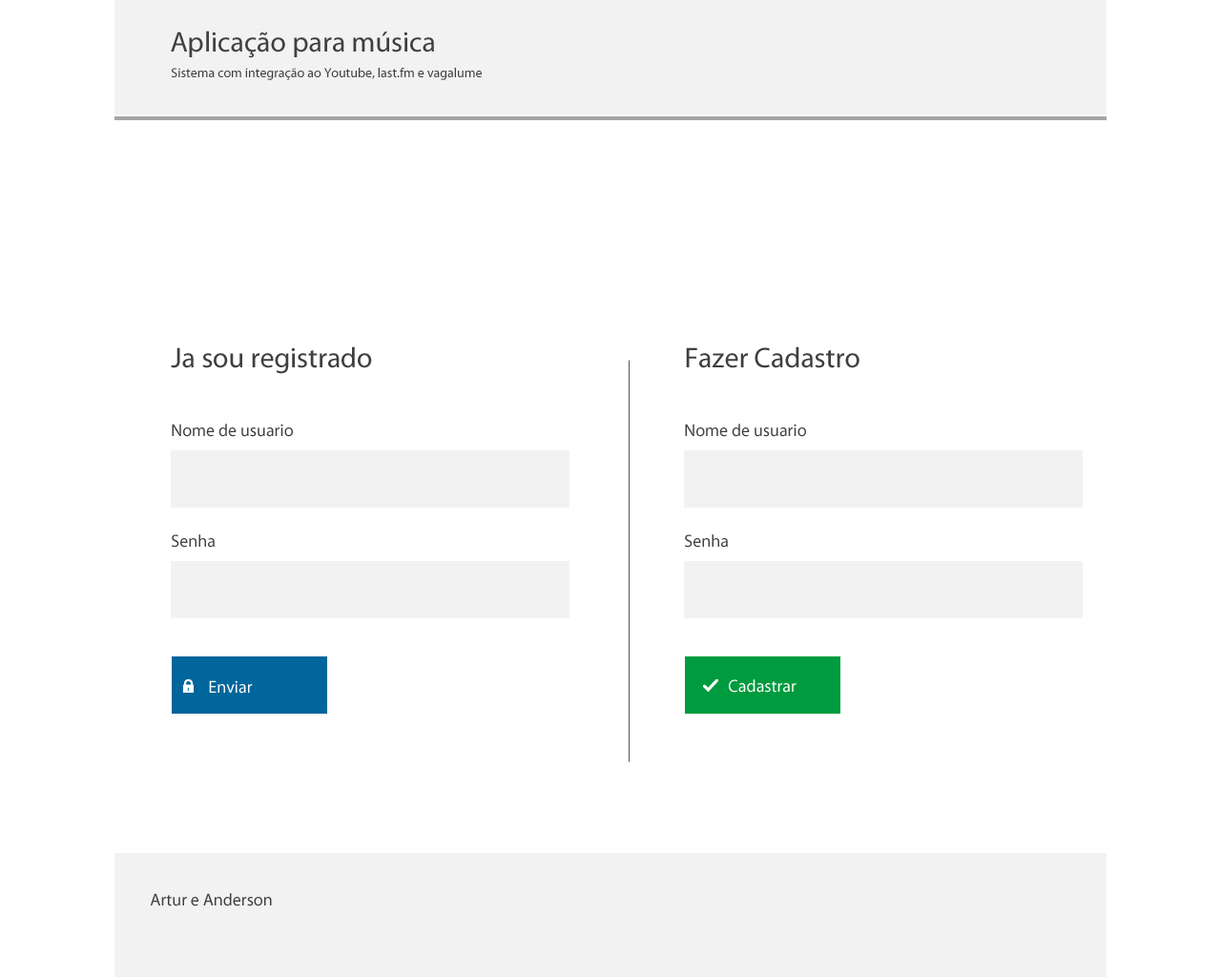
<style>
.page{position:relative;width:1221px;height:977px;background:#ffffff}
.page>*{position:absolute;margin:0}
.t1{font:28.6px "MyriadPro-Regular";color:#3f3f3f}
.t2{font:13.4px "MyriadPro-Regular";color:#3f3f3f}
.t3{font:17.2px "MyriadPro-Regular";color:#3f3f3f}
.t4{font:17.2px "MyriadPro-Regular";color:#ffffff}
</style>
<div class="page">
<p class="t1" style="left:171px;top:31px;width:263px;height:27px">Aplicação para música</p>
<p class="t2" style="left:171px;top:68px;width:311px;height:12px">Sistema com integração ao Youtube, last.fm e vagalume</p>
<p class="t1" style="left:171px;top:346px;width:201px;height:28px">Ja sou registrado</p>
<p class="t1" style="left:686px;top:346px;width:173px;height:22px">Fazer Cadastro</p>
<p class="t3" style="left:172px;top:423px;width:121px;height:14px">Nome de usuario</p>
<p class="t3" style="left:685px;top:423px;width:121px;height:14px">Nome de usuario</p>
<p class="t3" style="left:172px;top:534px;width:43px;height:13px">Senha</p>
<p class="t3" style="left:685px;top:534px;width:43px;height:13px">Senha</p>
<p class="t4" style="left:209px;top:680px;width:44px;height:13px">Enviar</p>
<p class="t4" style="left:729px;top:679px;width:67px;height:13px">Cadastrar</p>
<p class="t3" style="left:150px;top:893px;width:122px;height:13px">Artur e Anderson</p>
</div>
